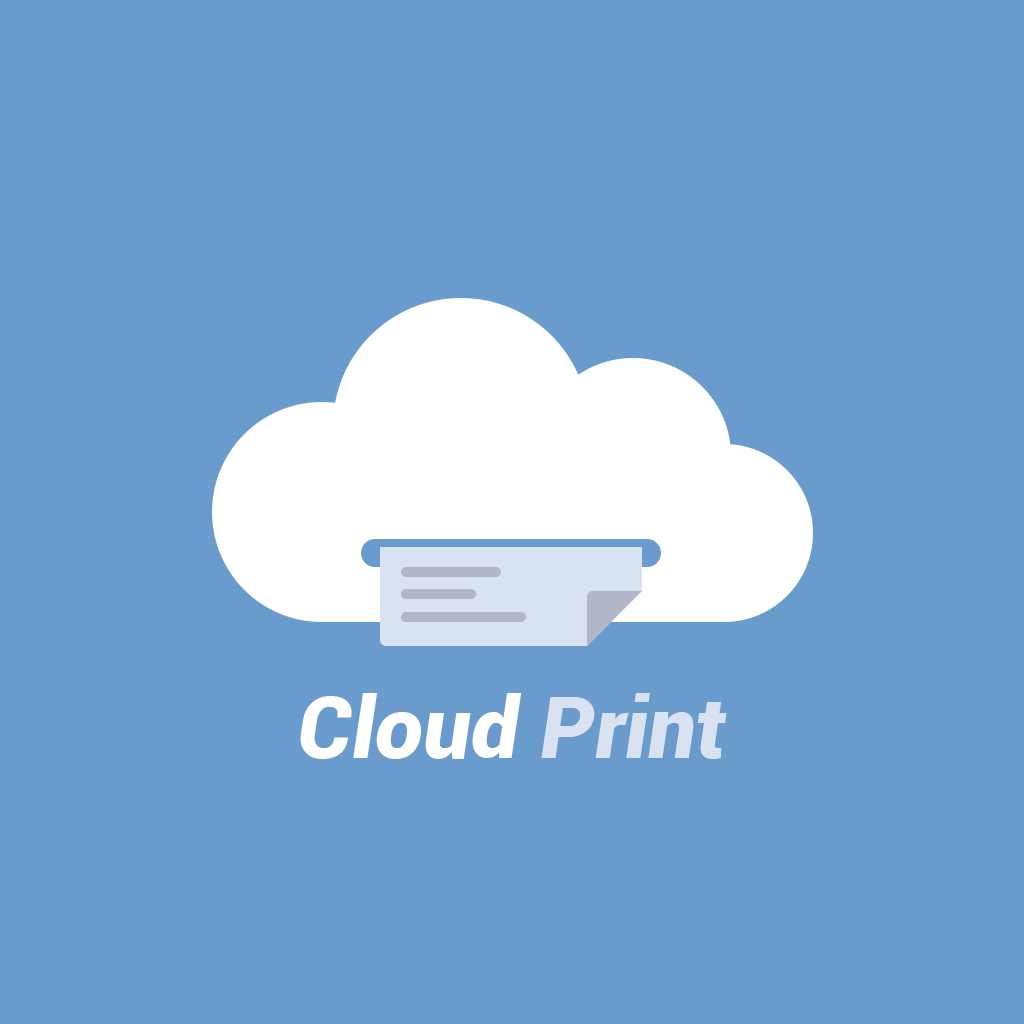
<style>
.page{position:relative;width:1024px;height:1024px;background:#699ccd}
.page>*{position:absolute;margin:0}
.t1{font:85.3px "Roboto-BlackItalic";color:#ffffff}
.t2{font:85.3px "Roboto-BlackItalic";color:#d9e2f1}
</style>
<div class="page">
<p class="t1" style="left:300px;top:693px;width:427px;height:66px">Cloud <span class="t2">Print</span></p>
</div>
